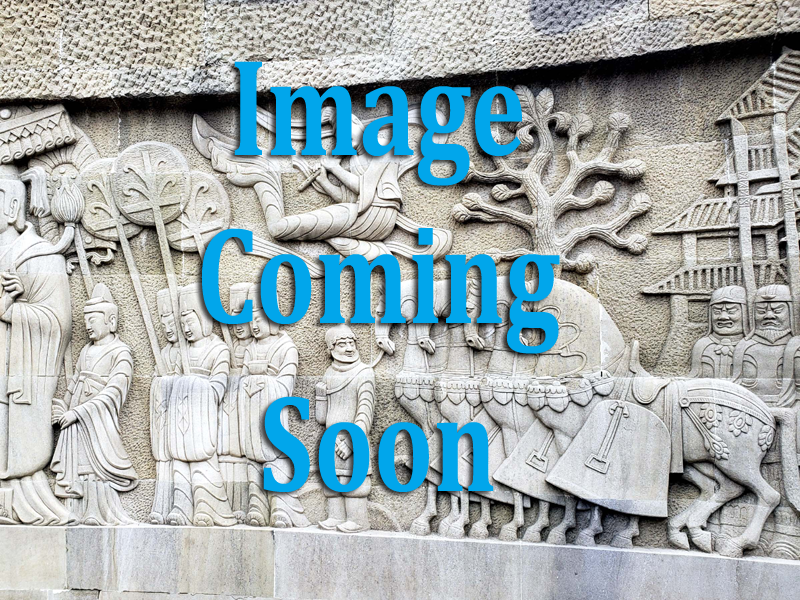
<style>
.page{position:relative;width:800px;height:600px}
.page>*{position:absolute;margin:0}
.t1{font:140px "Cambria-Bold";color:#01a6eb;scale:0.75 1}
</style>
<div class="page">
<p class="t1" style="left:201px;top:61px;width:359px;height:431px;text-align:center">Image <br>Coming <br>Soon</p>
</div>
